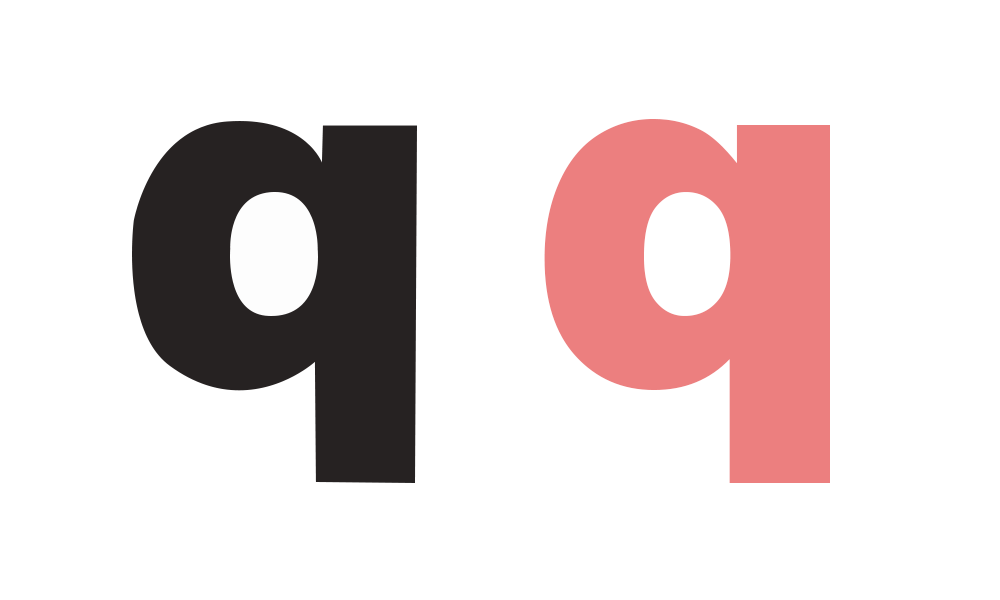
<style>
.page{position:relative;width:1000px;height:600px;background:#ffffff}
.page>*{position:absolute;margin:0}
.t1{font:500px "Arial-Black";color:#ec7f7f}
</style>
<div class="page">
<p class="t1" style="left:544px;top:119px;width:286px;height:364px">q</p>
</div>
